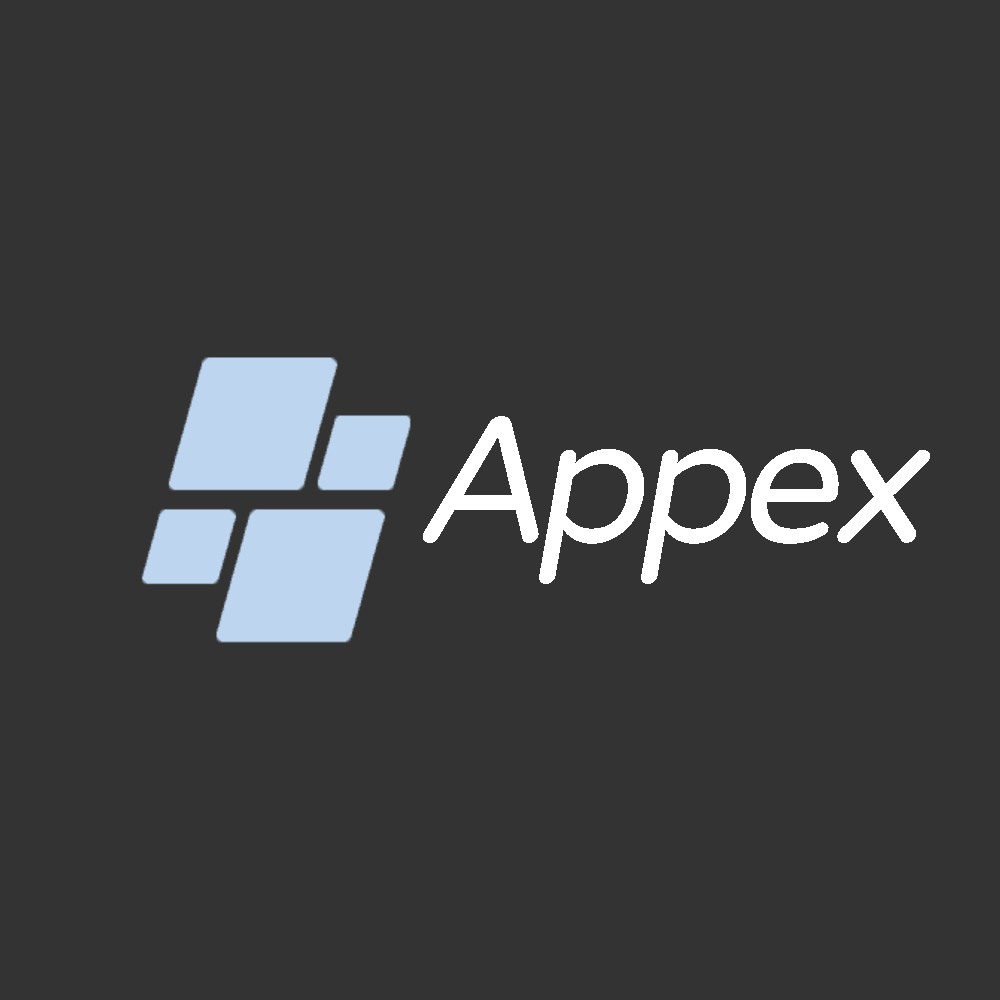
<style>
.page{position:relative;width:1000px;height:1000px;background:#333333}
.page>*{position:absolute;margin:0}
.t1{font:179.2px "VarelaRound-Regular";letter-spacing:-0.06em;color:#ffffff;font-style:italic}
</style>
<div class="page">
<p class="t1" style="left:423px;top:416px;width:507px;height:168px">Appex</p>
</div>
